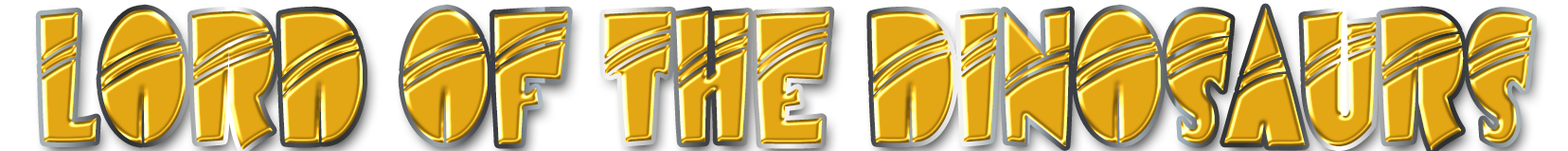
<style>
.page{position:relative;width:1568px;height:151px}
.page>*{position:absolute;margin:0}
.t1{font:181.4px "AirmoleStripe";scale:0.74 1}
</style>
<div class="page">
<p class="t1" style="left:40px;top:8px;width:1493px;height:143px">LORD OF THE DINOSAURS</p>
</div>
